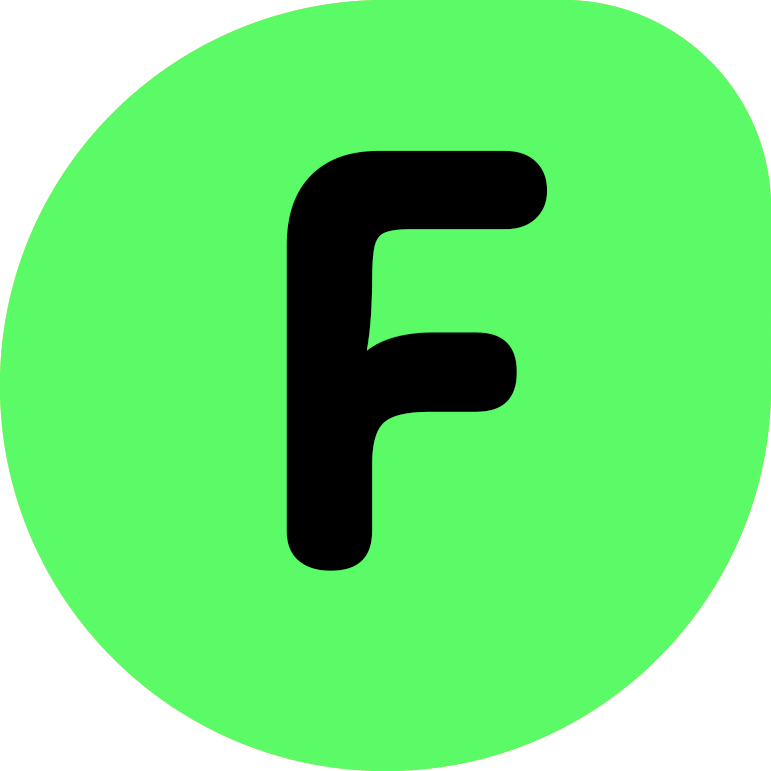
<style>
.page{position:relative;width:771px;height:771px;background:#5bfb68}
.page>*{position:absolute;margin:0}
.t1{font:592.5px "MadimiOne-Regular";color:#000000}
</style>
<div class="page">
<p class="t1" style="left:286px;top:150px;width:262px;height:421px">F</p>
</div>
